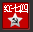
<style>
.page{position:relative;width:33px;height:32px;background:#c50000}
.page>*{position:absolute;margin:0}
.t1{font:10.4px "SimSun";letter-spacing:-0.25em;color:#ffffff}
</style>
<div class="page">
<p class="t1" style="left:4px;top:4px;width:24px;height:9px">红七四</p>
</div>
